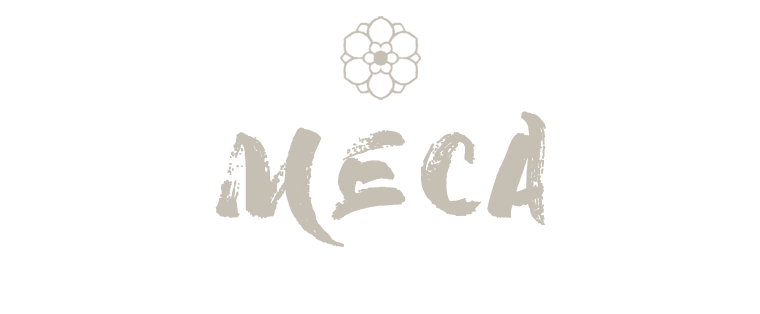
<style>
.page{position:relative;width:760px;height:314px;background:#ffffff}
.page>*{position:absolute;margin:0}
.t1{font:125px "DryBrush";letter-spacing:0.07em;color:#c5bfb4;font-weight:bold}
</style>
<div class="page">
<p class="t1" style="left:215px;top:111px;width:331px;height:136px">MECA</p>
</div>
